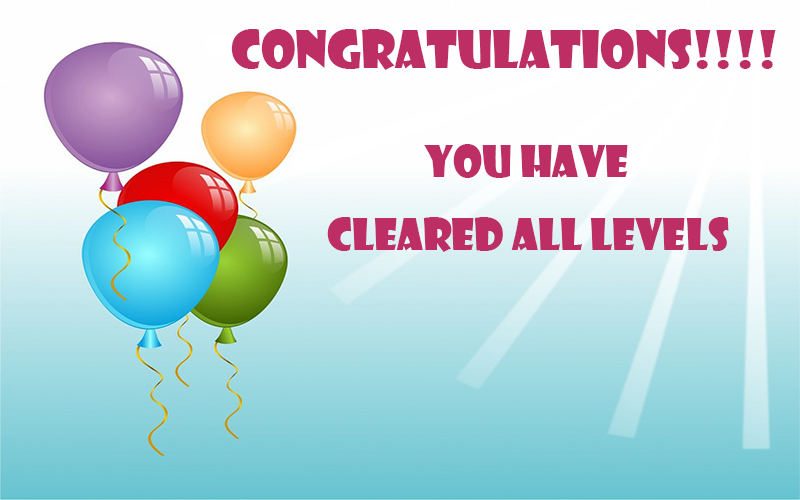
<style>
.page{position:relative;width:800px;height:500px}
.page>*{position:absolute;margin:0}
.t1{font:50px "ShowcardGothic-Reg";color:#bd2f64}
.t2{font:41.7px "ShowcardGothic-Reg";color:#bd2f64}
</style>
<div class="page">
<p class="t1" style="left:231px;top:29px;width:545px;height:41px">congratulations!!!!</p>
<p class="t2" style="left:424px;top:144px;width:204px;height:34px">You have</p>
<p class="t2" style="left:327px;top:217px;width:402px;height:35px">cleared all levels</p>
</div>
